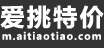
<style>
.page{position:relative;width:104px;height:48px;background:#333333}
.page>*{position:absolute;margin:0}
.t1{font:24px "MicrosoftYaHei-Bold";letter-spacing:0.1em;color:#ffffff}
.t2{font:10px "MicrosoftYaHei-Bold";letter-spacing:0.1em;color:#ffffff}
</style>
<div class="page">
<p class="t1" style="left:0px;top:5px;width:104px;height:24px">爱挑特价</p>
<p class="t2" style="left:2px;top:31px;width:99px;height:9px">m.aitiaotiao.com</p>
</div>
